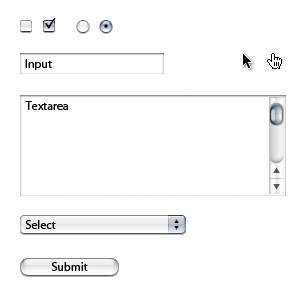
<style>
.page{position:relative;width:300px;height:300px;background:#ffffff}
.page>*{position:absolute;margin:0}
.t1{font:12px "Myriad-Roman";color:#000000}
</style>
<div class="page">
<p class="t1" style="left:25px;top:59px;width:27px;height:11px">Input</p>
<p class="t1" style="left:25px;top:101px;width:43px;height:9px">Textarea</p>
<p class="t1" style="left:25px;top:220px;width:31px;height:9px">Select</p>
<p class="t1" style="left:51px;top:262px;width:37px;height:9px">Submit</p>
</div>
